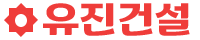
<style>
.page{position:relative;width:200px;height:40px;background:#ffffff}
.page>*{position:absolute;margin:0}
.t1{font:41.7px "TTWanjudaedunsancheR";color:#ef3c39}
</style>
<div class="page">
<p class="t1" style="left:43px;top:3px;width:147px;height:33px">유진건설</p>
</div>
